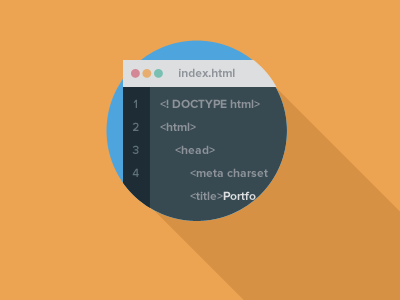
<style>
.page{position:relative;width:400px;height:300px;background:#eca352}
.page>*{position:absolute;margin:0}
.t1{font:12px "ProximaNova-Bold";color:#8e9399}
.t2{font:12px/23px "ProximaNova-Semibold";color:#617279}
.t3{font:12px/23px "ProximaNova-Bold";color:#8e9399}
.t4{font:12px/23px "ProximaNova-Bold";color:#dcdedf}
</style>
<div class="page">
<p class="t1" style="left:179px;top:68px;width:56px;height:9px">index.html</p>
<p class="t2" style="left:132px;top:99px;width:7px;height:78px;text-align:center">1<br>2<br>3<br>4</p>
<p class="t3" style="left:160px;top:99px;width:108px;height:101px">&lt;! DOCTYPE html&gt;<br>&lt;html&gt;<br>     &lt;head&gt;<br>          &lt;meta charset<br>          &lt;title&gt;<span class="t4">Portfo</span></p>
</div>
